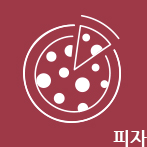
<style>
.page{position:relative;width:147px;height:147px;background:#9e3947}
.page>*{position:absolute;margin:0}
.t1{font:18px "NanumGothicBold";color:#ffffff}
</style>
<div class="page">
<p class="t1" style="left:113px;top:130px;width:34px;height:17px">피자</p>
</div>
